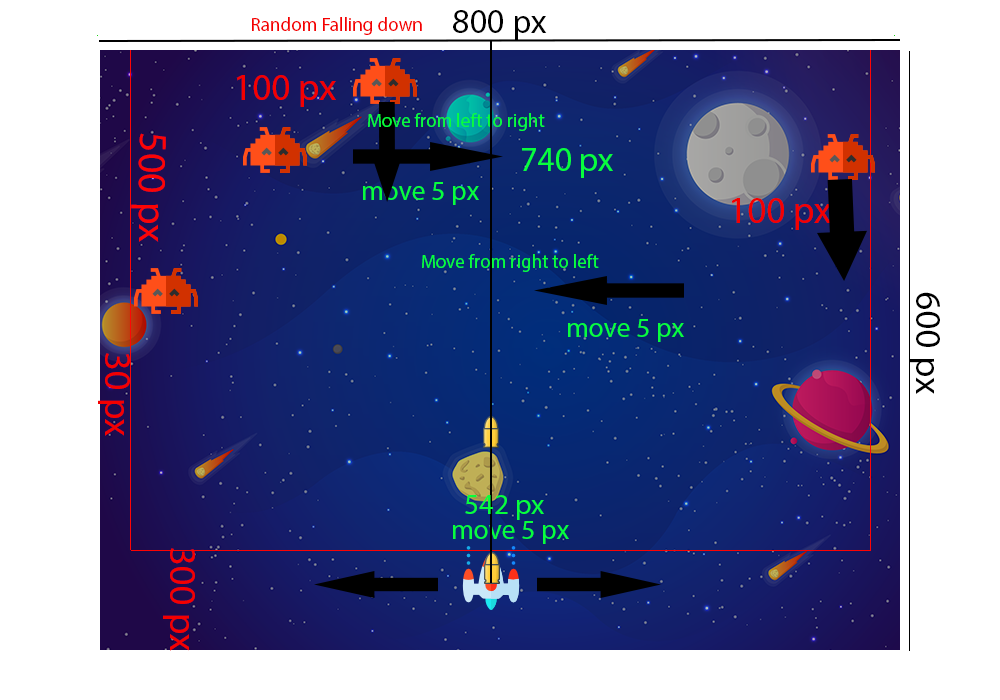
<style>
.page{position:relative;width:1000px;height:700px;background:#ffffff}
.page>*{position:absolute;margin:0}
.t1{font:19px "MyriadPro-Regular";color:#f40000}
.t2{font:34.4px "MyriadPro-Regular";color:#000000}
.t3{font:37.6px "MyriadPro-Regular";color:#f40000}
.t4{font:19px "MyriadPro-Regular";color:#08fe3c}
.t5{font:39.5px "MyriadPro-Regular";color:#fd0404}
.t6{font:34.1px "MyriadPro-Regular";color:#08fe3c}
.t7{font:27.5px "MyriadPro-Regular";color:#08fe3c}
.t8{font:37.1px "MyriadPro-Regular";color:#000000}
.t9{font:29px "MyriadPro-Regular";color:#08fe3c}
</style>
<div class="page">
<p class="t1" style="left:252px;top:17px;width:170px;height:18px">Random Falling down</p>
<p class="t2" style="left:453px;top:10px;width:94px;height:30px">800 px</p>
<p class="t3" style="left:236px;top:75px;width:100px;height:32px">100 px</p>
<p class="t4" style="left:368px;top:113px;width:177px;height:18px">Move from left to right</p>
<p class="t5" style="left:131px;top:133px;width:35px;height:109px;rotate:90deg">500 px</p>
<p class="t6" style="left:522px;top:148px;width:91px;height:30px">740 px</p>
<p class="t7" style="left:363px;top:182px;width:116px;height:23px">move 5 px</p>
<p class="t3" style="left:731px;top:198px;width:100px;height:32px">100 px</p>
<p class="t4" style="left:422px;top:254px;width:177px;height:18px">Move from right to left</p>
<p class="t8" style="left:909px;top:292px;width:31px;height:102px;rotate:90deg">600 px</p>
<p class="t7" style="left:568px;top:319px;width:116px;height:23px">move 5 px</p>
<p class="t3" style="left:98px;top:353px;width:32px;height:83px;rotate:90deg">30 px</p>
<p class="t9" style="left:465px;top:495px;width:79px;height:25px">542 px</p>
<p class="t7" style="left:453px;top:521px;width:116px;height:23px">move 5 px</p>
<p class="t3" style="left:163px;top:548px;width:32px;height:103px;rotate:90deg">300 px</p>
</div>
